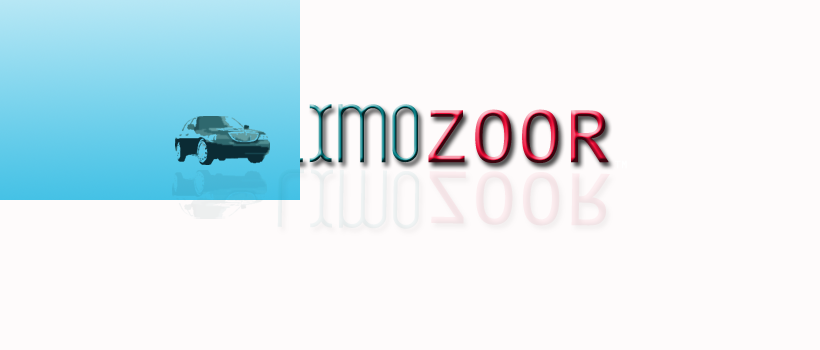
<style>
.page{position:relative;width:820px;height:350px;background:#fefbfb}
.page>*{position:absolute;margin:0}
.t1{font:72px "LoisAnn";letter-spacing:0.05em}
.t2{font:72px "TIUni";letter-spacing:0.05em}
.t3{font:72px "LoisAnn";letter-spacing:0.05em;color:#f3eaec}
.t4{font:72px "TIUni";letter-spacing:0.05em;color:#f3eaec}
</style>
<div class="page">
<p class="t1" style="left:277px;top:104px;width:332px;height:59px">LIMO<span class="t2">ZOOR</span></p>
<p class="t3" style="left:277px;top:169px;width:333px;height:60px;rotate:1deg">LIMO<span class="t4">ZOOR</span></p>
</div>
